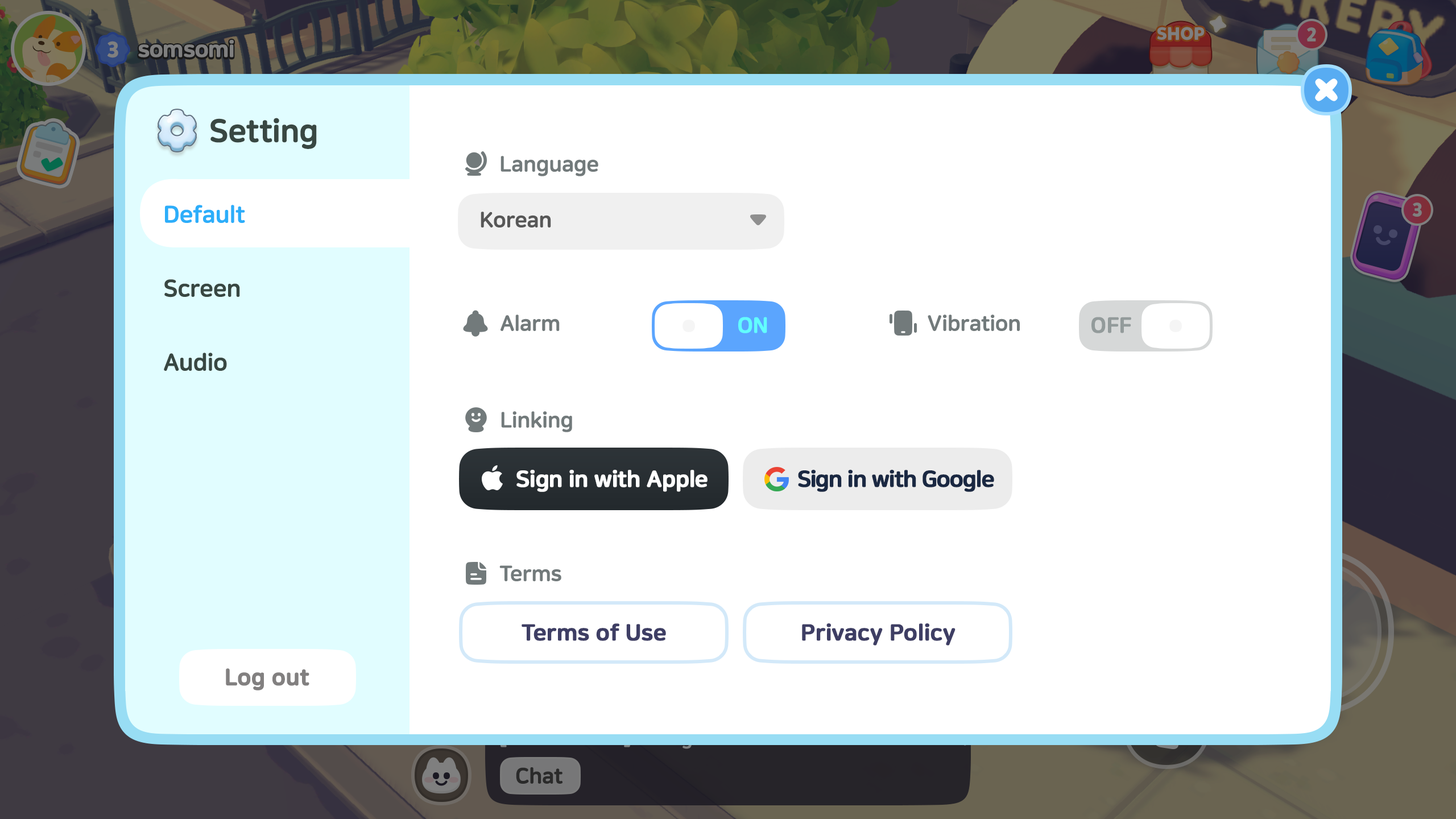
<style>
.page{position:relative;width:1456px;height:819px;background:#ffffff}
.page>*{position:absolute;margin:0}
.t1{font:31.8px "NanumSquareRoundOTFEB";letter-spacing:-0.02em;color:#384742;font-weight:bold}
.t2{font:21.6px "NanumSquareRoundOTFEB";letter-spacing:-0.01em;color:#727a7b}
.t3{font:23.9px "NanumSquareRoundOTFEB";letter-spacing:-0.01em;color:#2caefa}
.t4{font:21.6px "NanumSquareRoundOTFEB";letter-spacing:-0.01em;color:#575757}
.t5{font:23.9px "NanumSquareRoundOTFEB";letter-spacing:-0.01em;color:#384742}
.t6{font:21.6px "NanumSquareRoundOTFEB";letter-spacing:-0.01em;color:#62fffd;text-transform:uppercase;font-weight:bold}
.t7{font:21.6px "NanumSquareRoundOTFEB";letter-spacing:-0.01em;color:#939b9b;text-transform:uppercase;font-weight:bold}
.t8{font:22.7px "NanumSquareRoundOTFEB";letter-spacing:-0.03em;color:#ffffff;font-weight:bold}
.t9{font:22.7px "NanumSquareRoundOTFEB";letter-spacing:-0.05em;color:#1a2842;font-weight:bold}
.t10{font:22.7px "NanumSquareRoundOTFEB";letter-spacing:-0.01em;color:#3e3e64;font-weight:bold}
.t11{font:22.7px "NanumSquareRoundOTFEB";letter-spacing:-0.01em;color:#828080;font-weight:bold}
</style>
<div class="page">
<p class="t1" style="left:210px;top:118px;width:107px;height:31px">Setting</p>
<p class="t2" style="left:500px;top:156px;width:98px;height:20px">Language</p>
<p class="t3" style="left:165px;top:205px;width:80px;height:18px">Default</p>
<p class="t4" style="left:481px;top:212px;width:70px;height:15px">Korean</p>
<p class="t5" style="left:164px;top:279px;width:76px;height:18px">Screen</p>
<p class="t2" style="left:500px;top:315px;width:60px;height:16px">Alarm</p>
<p class="t6" style="left:738px;top:317px;width:29px;height:16px">ON</p>
<p class="t2" style="left:928px;top:315px;width:92px;height:16px">Vibration</p>
<p class="t7" style="left:1091px;top:317px;width:40px;height:16px">off</p>
<p class="t5" style="left:164px;top:353px;width:63px;height:18px">Audio</p>
<p class="t2" style="left:501px;top:411px;width:71px;height:21px">Linking</p>
<p class="t8" style="left:516px;top:470px;width:192px;height:22px">Sign in with Apple</p>
<p class="t9" style="left:798px;top:470px;width:196px;height:22px">Sign in with Google</p>
<p class="t2" style="left:499px;top:565px;width:62px;height:16px">Terms</p>
<p class="t10" style="left:522px;top:623px;width:144px;height:18px">Terms of Use</p>
<p class="t10" style="left:802px;top:623px;width:153px;height:23px">Privacy Policy</p>
<p class="t11" style="left:226px;top:668px;width:83px;height:22px">Log out</p>
</div>
